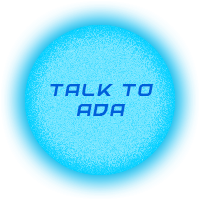
<style>
.page{position:relative;width:200px;height:200px}
.page>*{position:absolute;margin:0}
.t1{font:16.7px "UnitedKingdom";letter-spacing:0.13em;color:#0060db;font-style:italic}
</style>
<div class="page">
<p class="t1" style="left:50px;top:84px;width:103px;height:32px;text-align:center">Talk to ada</p>
</div>
